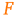
<style>
.page{position:relative;width:16px;height:16px;background:#ffffff}
.page>*{position:absolute;margin:0}
.t1{font:18.7px "FangSong_GB2312";color:#ff7200;text-transform:uppercase;font-weight:bold;font-style:italic}
</style>
<div class="page">
<p class="t1" style="left:3px;top:1px;width:11px;height:14px">F</p>
</div>
